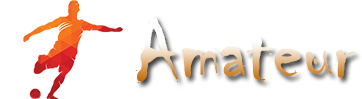
<style>
.page{position:relative;width:362px;height:99px;background:#ffffff}
.page>*{position:absolute;margin:0}
.t1{font:89.9px "Chiller-Regular"}
</style>
<div class="page">
<p class="t1" style="left:136px;top:15px;width:219px;height:68px">Amateur</p>
</div>
